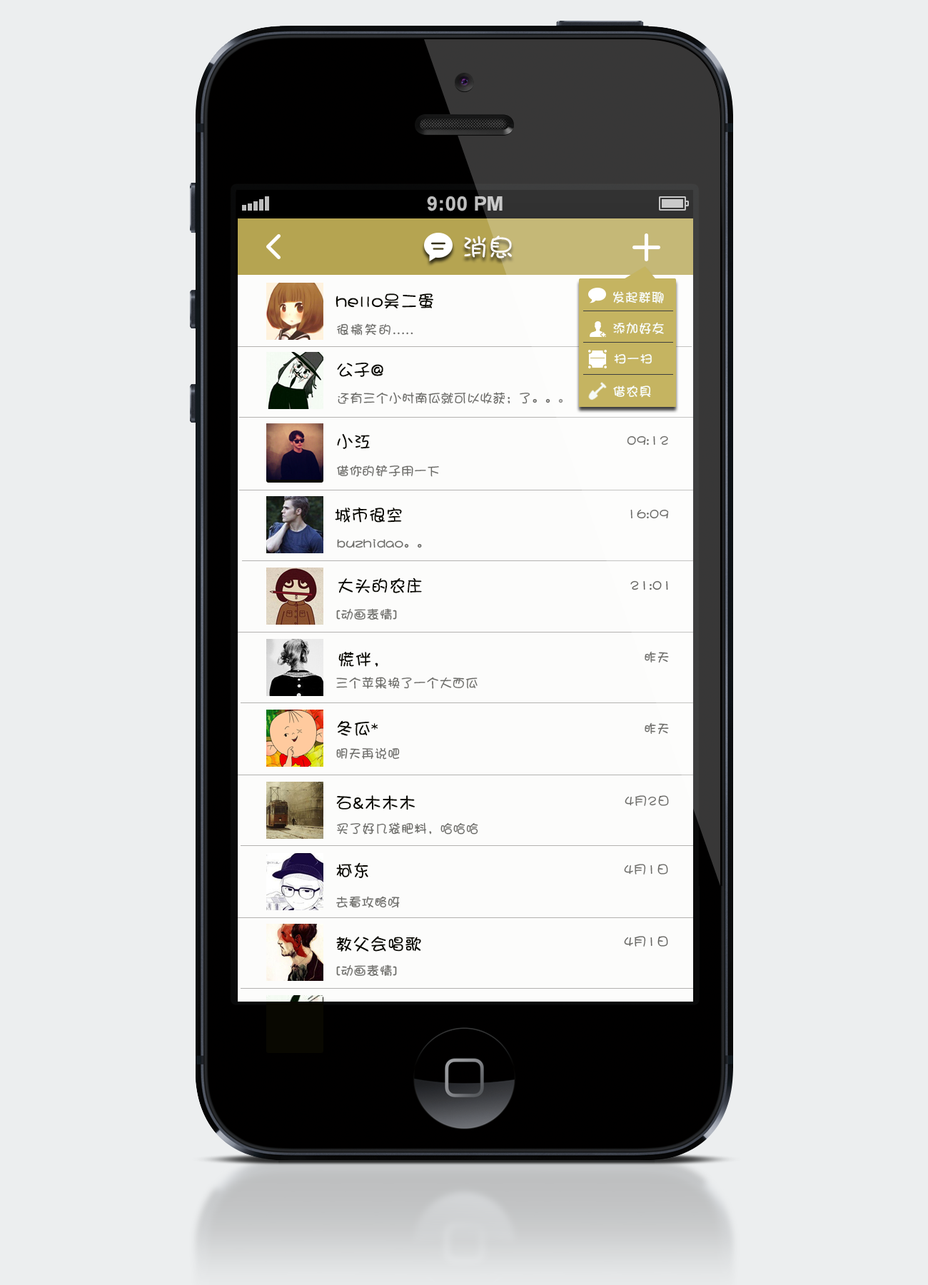
<style>
.page{position:relative;width:928px;height:1285px;background:#eceeef}
.page>*{position:absolute;margin:0}
.t1{font:25.7px "DFPShaoNvW5";letter-spacing:0.02em;color:#fbf9f8}
.t2{font:17.1px "DFPShaoNvW5";letter-spacing:0.01em;color:#090801}
.t3{font:12.8px "DFPShaoNvW5";letter-spacing:0.02em;color:#f9fdfa}
.t4{font:12.8px "DFPShaoNvW5";letter-spacing:0.1em;color:#696965}
.t5{font:12.8px "DFPShaoNvW5";letter-spacing:0.01em;color:#696965}
.t6{font:12.8px "DFPShaoNvW5";letter-spacing:0.01em;color:#696966}
.t7{font:12.8px "DFPShaoNvW5";letter-spacing:0.01em;color:#61605d}
.t8{font:12.8px "DFPShaoNvW5";letter-spacing:0.01em;color:#646360}
</style>
<div class="page">
<p class="t1" style="left:464px;top:236px;width:48px;height:22px">消息</p>
<p class="t2" style="left:336px;top:293px;width:98px;height:16px">hello吴二蛋</p>
<p class="t3" style="left:613px;top:291px;width:51px;height:12px">发起群聊</p>
<p class="t4" style="left:337px;top:323px;width:76px;height:13px">很搞笑的.....</p>
<p class="t3" style="left:613px;top:322px;width:51px;height:12px">添加好友</p>
<p class="t2" style="left:337px;top:363px;width:46px;height:14px">公子@</p>
<p class="t3" style="left:614px;top:354px;width:38px;height:10px">扫一扫</p>
<p class="t3" style="left:613px;top:385px;width:38px;height:13px">借农具</p>
<p class="t5" style="left:338px;top:392px;width:225px;height:12px">还有三个小时南瓜就可以收获；了。。。</p>
<p class="t2" style="left:337px;top:433px;width:33px;height:16px">小江</p>
<p class="t6" style="left:627px;top:435px;width:41px;height:10px">09:12</p>
<p class="t5" style="left:337px;top:465px;width:102px;height:12px">借你的铲子用一下</p>
<p class="t2" style="left:335px;top:507px;width:67px;height:16px">城市很空</p>
<p class="t6" style="left:630px;top:509px;width:39px;height:10px">16:09</p>
<p class="t5" style="left:337px;top:539px;width:85px;height:9px">buzhidao。。</p>
<p class="t2" style="left:338px;top:578px;width:84px;height:15px">大头的农庄</p>
<p class="t7" style="left:630px;top:580px;width:38px;height:10px">21:01</p>
<p class="t5" style="left:336px;top:608px;width:61px;height:12px">[动画表情]</p>
<p class="t2" style="left:338px;top:651px;width:40px;height:16px">慌伴，</p>
<p class="t6" style="left:645px;top:651px;width:24px;height:12px">昨天</p>
<p class="t5" style="left:336px;top:677px;width:142px;height:12px">三个苹果换了一个大西瓜</p>
<p class="t2" style="left:337px;top:720px;width:41px;height:16px">冬瓜*</p>
<p class="t5" style="left:645px;top:722px;width:24px;height:13px">昨天</p>
<p class="t5" style="left:336px;top:747px;width:64px;height:13px">明天再说吧</p>
<p class="t2" style="left:336px;top:795px;width:79px;height:15px">石&amp;木木木</p>
<p class="t5" style="left:625px;top:795px;width:44px;height:11px">4月2日</p>
<p class="t5" style="left:337px;top:822px;width:141px;height:12px">买了好几袋肥料，哈哈哈</p>
<p class="t2" style="left:336px;top:862px;width:32px;height:16px">柯东</p>
<p class="t5" style="left:624px;top:864px;width:44px;height:10px">4月1日</p>
<p class="t5" style="left:336px;top:896px;width:64px;height:12px">去看攻略呀</p>
<p class="t2" style="left:336px;top:936px;width:85px;height:16px">教父会唱歌</p>
<p class="t8" style="left:624px;top:936px;width:44px;height:11px">4月1日</p>
<p class="t5" style="left:336px;top:964px;width:61px;height:13px">[动画表情]</p>
</div>
